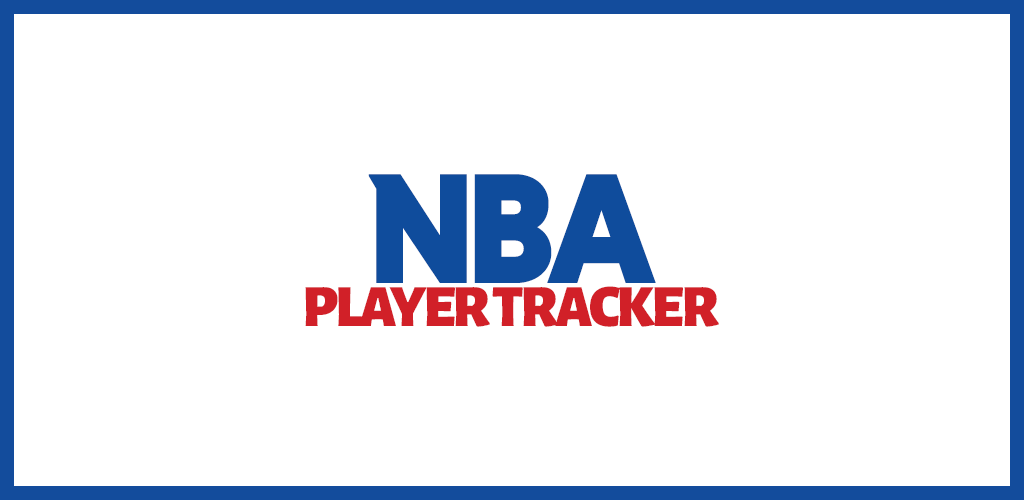
<style>
.page{position:relative;width:1024px;height:500px;background:#ffffff}
.page>*{position:absolute;margin:0}
.t1{font:160px "NiveauGroteskBlack";letter-spacing:-0.04em;color:#0f4c9c}
.t2{font:60px "AlegreyaSans-Black";letter-spacing:-0.05em;color:#d12028}
</style>
<div class="page">
<p class="t1" style="left:368px;top:174px;width:288px;height:109px">NBA</p>
<p class="t2" style="left:305px;top:286px;width:414px;height:41px">PLAYER TRACKER</p>
</div>
